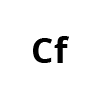
<style>
.page{position:relative;width:100px;height:100px;background:#ffffff}
.page>*{position:absolute;margin:0}
.t1{font:35px "OpenSans-Bold";color:#000000}
</style>
<div class="page">
<p class="t1" style="left:33px;top:36px;width:36px;height:27px">Cf</p>
</div>
